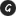
<style>
.page{position:relative;width:16px;height:16px;background:#242424}
.page>*{position:absolute;margin:0}
.t1{font:16px "JamesFajardo";color:#ffffff}
</style>
<div class="page">
<p class="t1" style="left:5px;top:4px;width:7px;height:8px">G</p>
</div>
